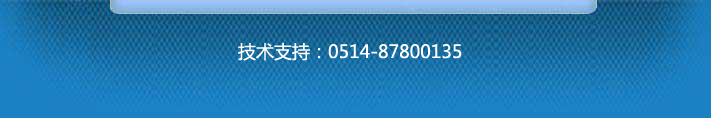
<style>
.page{position:relative;width:711px;height:118px}
.page>*{position:absolute;margin:0}
.t1{font:18px "MicrosoftYaHei";color:#ffffff}
</style>
<div class="page">
<p class="t1" style="left:238px;top:42px;width:224px;height:19px">技术支持：0514-87800135</p>
</div>
